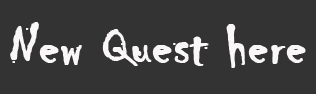
<style>
.page{position:relative;width:316px;height:94px;background:#333333}
.page>*{position:absolute;margin:0}
.t1{font:58.7px "Chiller-Regular";color:#f9f7f7;font-weight:bold}
</style>
<div class="page">
<p class="t1" style="left:10px;top:22px;width:296px;height:46px">New Quest here</p>
</div>
